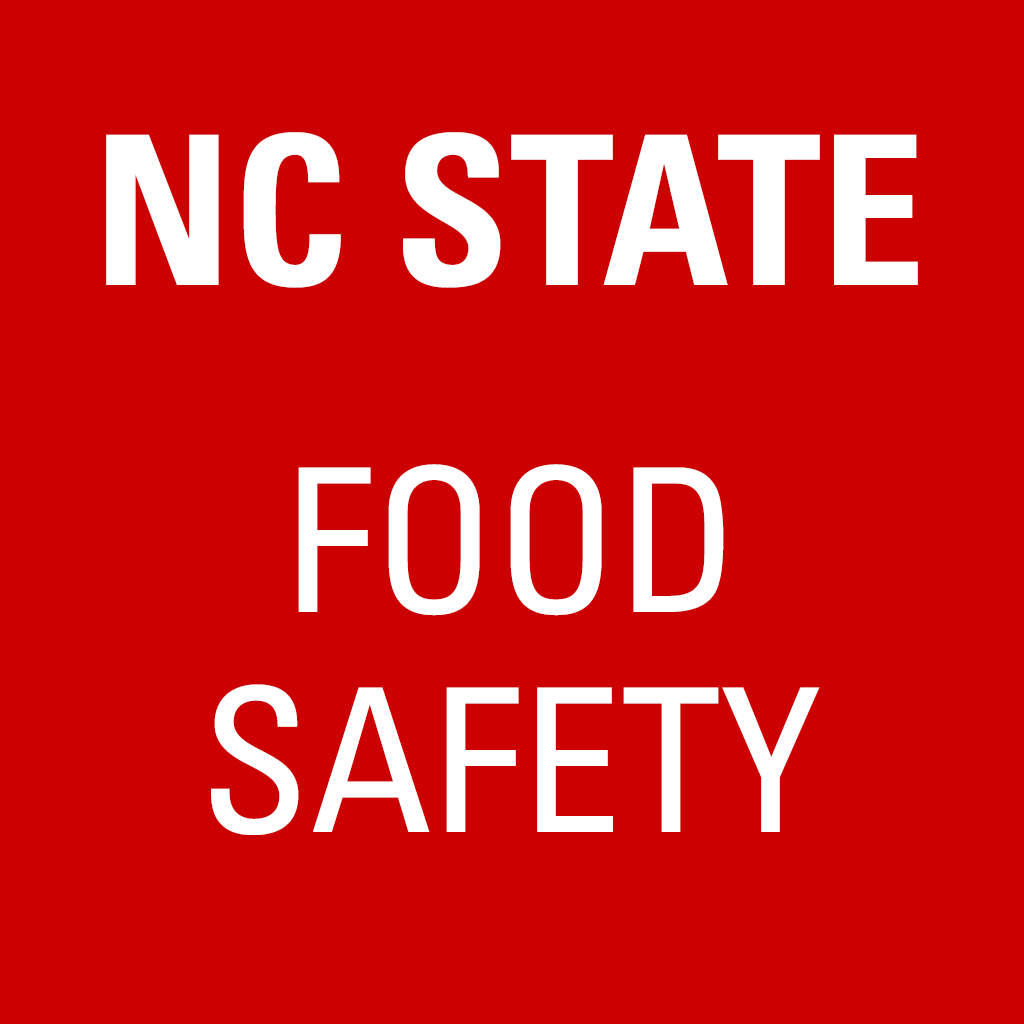
<style>
.page{position:relative;width:1024px;height:1024px;background:#cc0000}
.page>*{position:absolute;margin:0}
.t1{font:208px "Univers-CondensedBold";color:#ffffff}
.t2{font:200px "Univers-Condensed";color:#ffffff}
</style>
<div class="page">
<p class="t1" style="left:106px;top:132px;width:812px;height:156px">NC STATE</p>
<p class="t2" style="left:298px;top:464px;width:426px;height:152px">FOOD</p>
<p class="t2" style="left:211px;top:684px;width:609px;height:151px">SAFETY</p>
</div>
